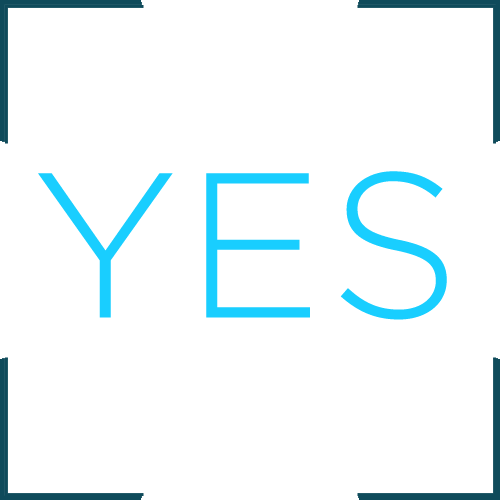
<style>
.page{position:relative;width:500px;height:500px;background:#ffffff}
.page>*{position:absolute;margin:0}
.t1{font:205.5px "Gotham-Light";letter-spacing:0.03em;color:#19ceff}
</style>
<div class="page">
<p class="t1" style="left:38px;top:171px;width:409px;height:149px">YES</p>
</div>
